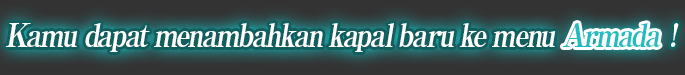
<style>
.page{position:relative;width:685px;height:75px;background:#333333}
.page>*{position:absolute;margin:0}
.t1{font:31.7px "RyuminPro-ExBold";letter-spacing:-0.08em;color:#ffffff;font-style:italic;scale:0.9 1}
.t2{font:31.7px "RyuminPro-ExBold";letter-spacing:-0.08em;color:#20bcbf;font-style:italic;scale:0.9 1}
</style>
<div class="page">
<p class="t1" style="left:5px;top:23px;width:674px;height:29px">Kamu dapat menambahkan kapal baru ke menu                !</p>
<p class="t2" style="left:562px;top:23px;width:98px;height:24px">Armada</p>
</div>
